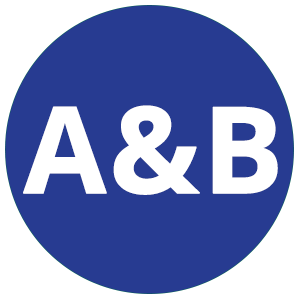
<style>
.page{position:relative;width:300px;height:300px;background:#273b91}
.page>*{position:absolute;margin:0}
.t1{font:119.9px "OpenSans-Bold";color:#ffffff;font-weight:bold}
</style>
<div class="page">
<p class="t1" style="left:23px;top:105px;width:255px;height:90px">A&amp;B</p>
</div>
